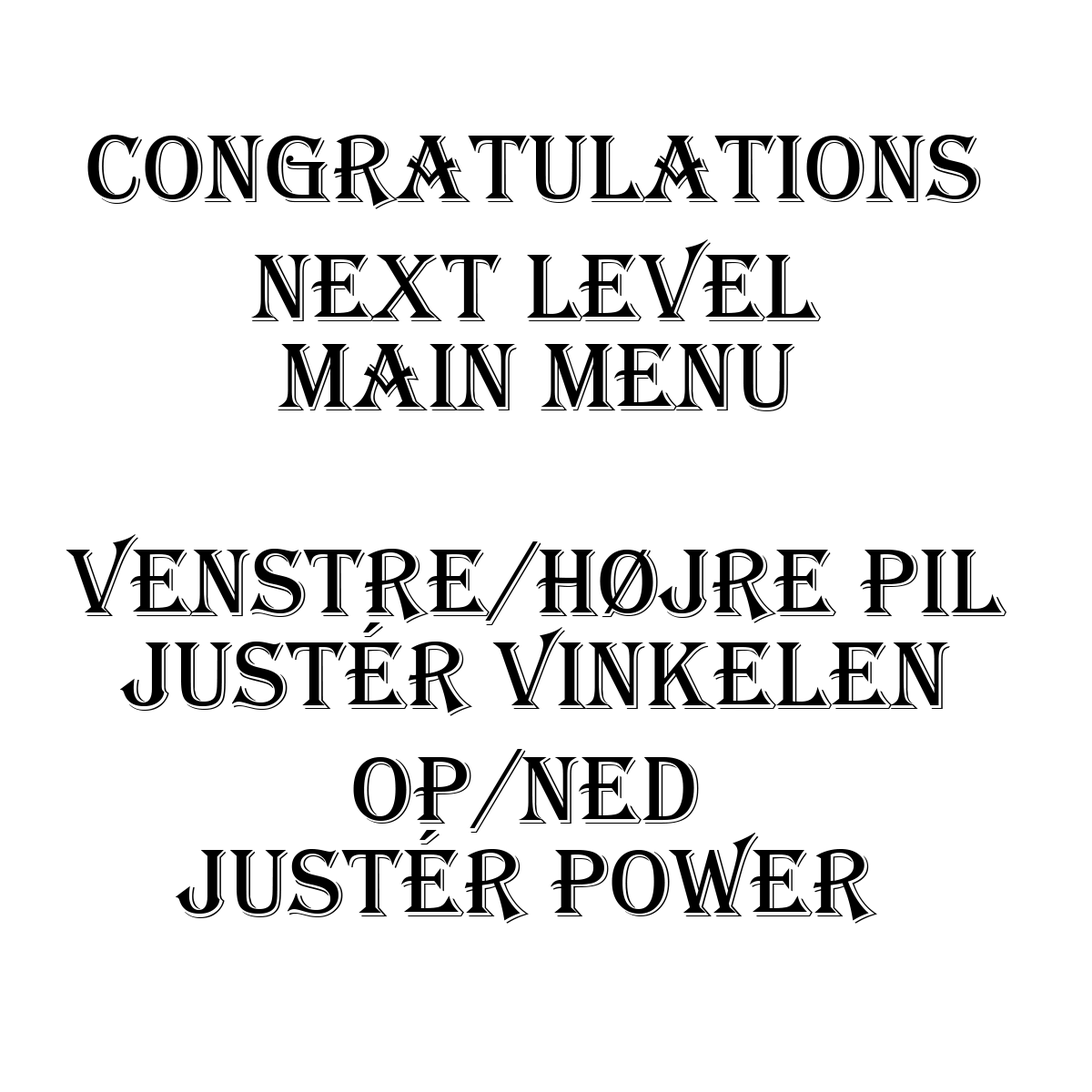
<style>
.page{position:relative;width:1092px;height:1092px;background:#ffffff}
.page>*{position:absolute;margin:0}
.t1{font:99.2px "Algerian";color:#000000}
.t2{font:99.2px/46.4px "Algerian";color:#000000}
</style>
<div class="page">
<p class="t1" style="left:87px;top:135px;width:894px;height:74px">Congratulations</p>
<p class="t1" style="left:250px;top:239px;width:571px;height:82px">Next level</p>
<p class="t1" style="left:278px;top:344px;width:517px;height:67px">Main menu</p>
<p class="t2" style="left:66px;top:534px;width:940px;height:182px;text-align:center">Venstre/Højre pil<br><br>Justér vinkelen</p>
<p class="t2" style="left:176px;top:749px;width:701px;height:175px;text-align:center">Op/Ned<br><br>Justér Power</p>
</div>
